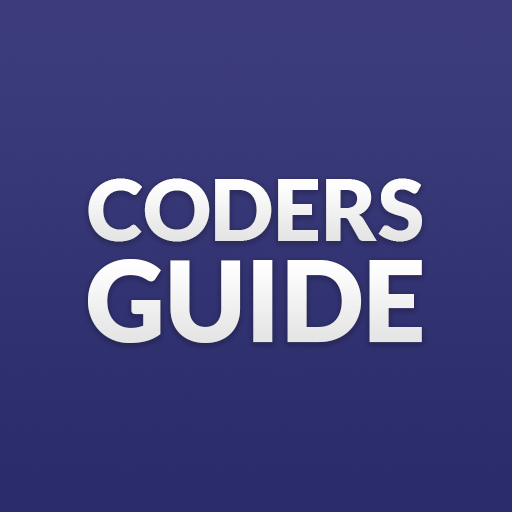
<style>
.page{position:relative;width:512px;height:512px}
.page>*{position:absolute;margin:0}
.t1{font:84.8px "Lato-Black";color:#ffffff;text-transform:uppercase}
.t2{font:110.6px "Lato-Black";color:#ffffff;text-transform:uppercase}
</style>
<div class="page">
<p class="t1" style="left:88px;top:178px;width:334px;height:64px">coders</p>
<p class="t2" style="left:88px;top:259px;width:334px;height:84px">guide</p>
</div>
